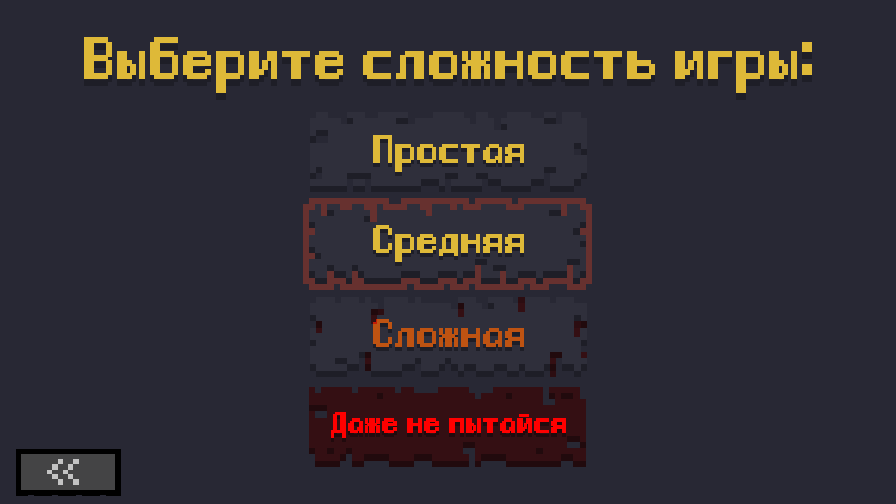
<style>
.page{position:relative;width:896px;height:504px;background:#282834}
.page>*{position:absolute;margin:0}
.t1{font:36px "Gnomoria_rus";color:#deb938;font-weight:bold}
.t2{font:36px "Gnomoria_rus";font-weight:bold}
.t3{font:24px "Gnomoria_rus";color:#deb938;font-weight:bold}
.t4{font:24px "Gnomoria_rus";font-weight:bold}
.t5{font:24px "Gnomoria_rus";color:#be5312;font-weight:bold}
.t6{font:18px "Gnomoria_rus";color:#ff0000;font-weight:bold}
.t7{font:18px "Gnomoria_rus";font-weight:bold}
</style>
<div class="page">
<p class="t1" style="left:84px;top:37px;width:728px;height:56px">Выберите сложность игры:</p>
<p class="t2" style="left:84px;top:44px;width:728px;height:56px">Выберите сложность игры:</p>
<p class="t3" style="left:373px;top:135px;width:151px;height:37px">Простая</p>
<p class="t4" style="left:373px;top:139px;width:151px;height:37px">Простая</p>
<p class="t4" style="left:373px;top:229px;width:151px;height:37px">Средняя</p>
<p class="t3" style="left:373px;top:225px;width:151px;height:37px">Средняя</p>
<p class="t4" style="left:373px;top:323px;width:151px;height:28px">Сложная</p>
<p class="t5" style="left:373px;top:319px;width:151px;height:28px">Сложная</p>
<p class="t6" style="left:331px;top:412px;width:235px;height:26px">Даже не пытайся</p>
<p class="t7" style="left:331px;top:416px;width:235px;height:26px">Даже не пытайся</p>
</div>
